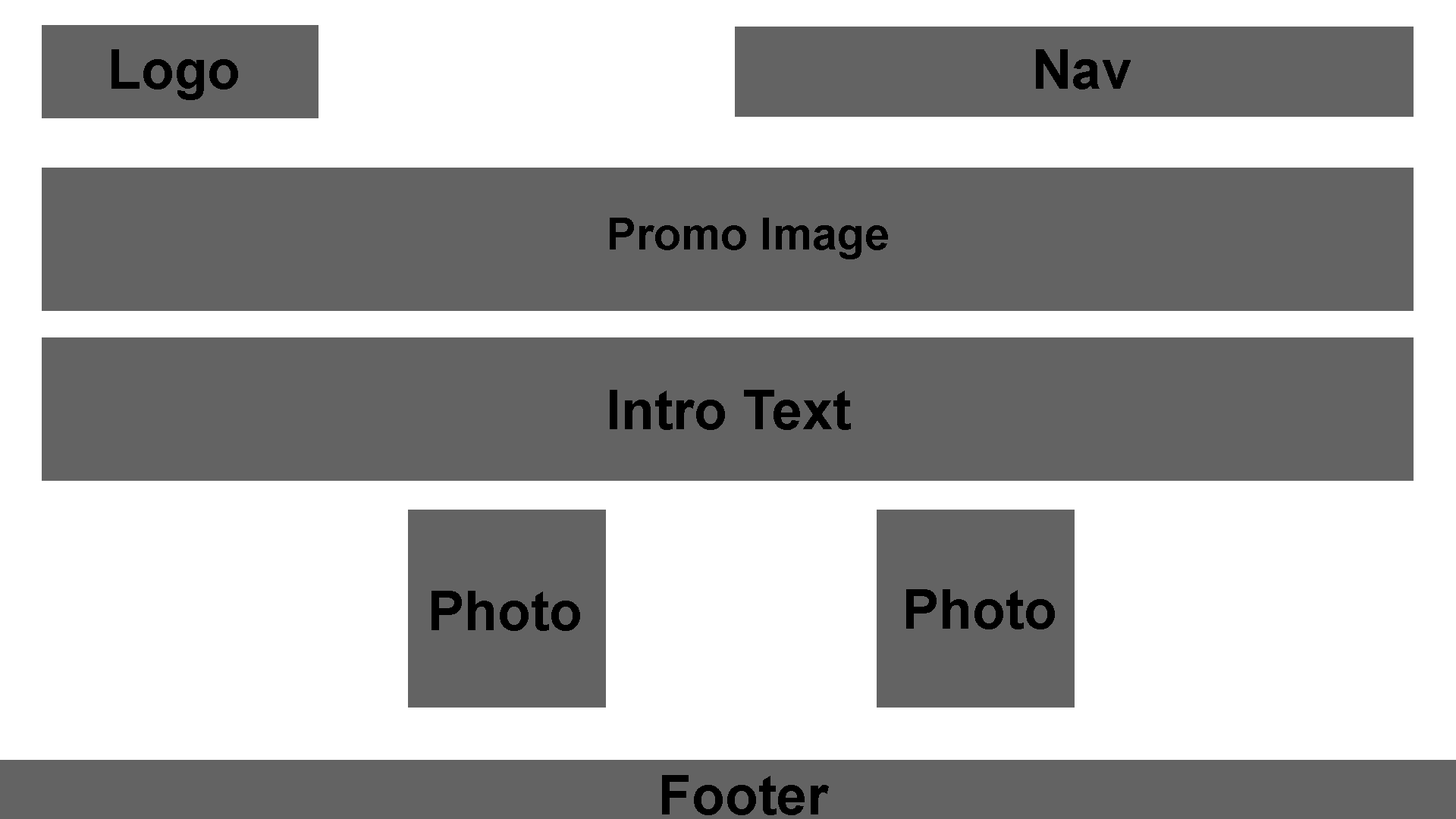
<style>
.page{position:relative;width:1456px;height:819px;background:#636363}
.page>*{position:absolute;margin:0}
.t1{font:54.6px "Arial-BoldMT";color:#000000}
.t2{font:44.6px "Arial-BoldMT";color:#000000}
</style>
<div class="page">
<p class="t1" style="left:111px;top:49px;width:127px;height:51px">Logo</p>
<p class="t1" style="left:1036px;top:49px;width:95px;height:40px">Nav</p>
<p class="t2" style="left:610px;top:218px;width:278px;height:41px">Promo Image</p>
<p class="t1" style="left:610px;top:390px;width:241px;height:40px">Intro Text</p>
<p class="t1" style="left:431px;top:591px;width:149px;height:40px">Photo</p>
<p class="t1" style="left:906px;top:589px;width:149px;height:40px">Photo</p>
<p class="t1" style="left:662px;top:775px;width:167px;height:40px">Footer</p>
</div>
